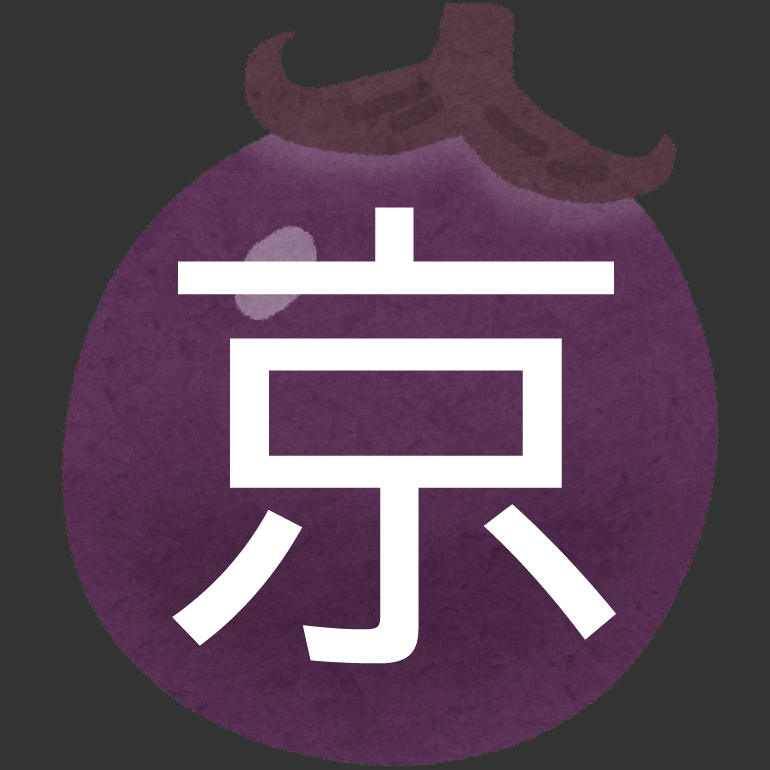
<style>
.page{position:relative;width:770px;height:770px;background:#333333}
.page>*{position:absolute;margin:0}
.t1{font:480px "BIZ-UDPGothic";color:#ffffff}
</style>
<div class="page">
<p class="t1" style="left:172px;top:207px;width:444px;height:457px">京</p>
</div>
